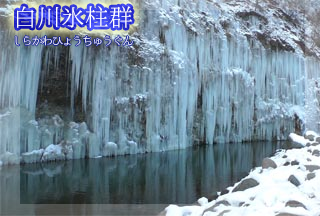
<style>
.page{position:relative;width:320px;height:216px}
.page>*{position:absolute;margin:0}
.t1{font:24px "02UtsukushiMincho";color:#ffffff}
.t2{font:12px "02UtsukushiMincho";letter-spacing:-0.16em;color:#ffffff}
</style>
<div class="page">
<p class="t1" style="left:17px;top:6px;width:115px;height:22px">白川氷柱群</p>
<p class="t2" style="left:15px;top:35px;width:118px;height:11px">しらかわひょうちゅうぐん</p>
</div>
